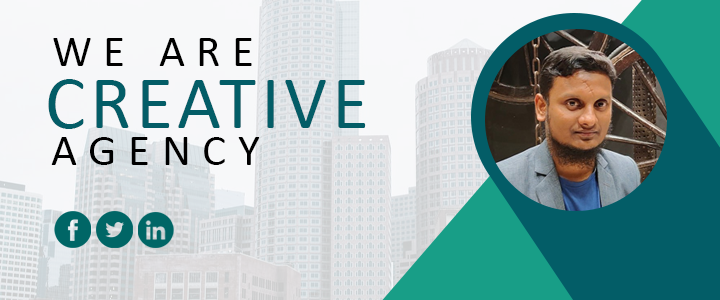
<style>
.page{position:relative;width:720px;height:300px}
.page>*{position:absolute;margin:0}
.t1{font:44.8px "Calibri";letter-spacing:0.26em;color:#000000}
.t2{font:75.8px "Calibri";letter-spacing:0.06em;color:#035d67}
.t3{font:44.9px "Calibri";letter-spacing:0.26em;color:#000000}
</style>
<div class="page">
<p class="t1" style="left:53px;top:38px;width:199px;height:28px">WE ARE</p>
<p class="t2" style="left:48px;top:79px;width:318px;height:50px">CREATIVE</p>
<p class="t3" style="left:51px;top:137px;width:209px;height:28px">AGENCY</p>
</div>
